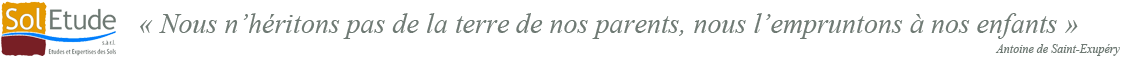
<style>
.page{position:relative;width:1123px;height:57px;background:#ffffff}
.page>*{position:absolute;margin:0}
.t1{font:28px "TimesNewRomanPS-ItalicMT";color:#6f7a74}
.t2{font:12px "TimesNewRomanPS-ItalicMT";color:#6f7a74}
</style>
<div class="page">
<p class="t1" style="left:140px;top:13px;width:938px;height:26px">« Nous n’héritons pas de la terre de nos parents, nous l’empruntons à nos enfants »</p>
<p class="t2" style="left:995px;top:44px;width:125px;height:12px">Antoine de Saint-Exupéry</p>
</div>
